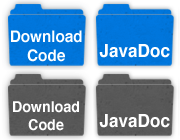
<style>
.page{position:relative;width:180px;height:140px}
.page>*{position:absolute;margin:0}
.t1{font:16px "Helvetica-Bold";color:#ffffff;scale:0.95 1}
.t2{font:18px "Helvetica-Bold";color:#ffffff;scale:0.95 1}
.t3{font:15px "Helvetica-Bold";color:#ffffff;scale:0.95 1}
</style>
<div class="page">
<p class="t1" style="left:11px;top:30px;width:71px;height:32px;text-align:center">Download<br>Code</p>
<p class="t2" style="left:99px;top:44px;width:71px;height:14px">JavaDoc</p>
<p class="t3" style="left:13px;top:101px;width:66px;height:30px;text-align:center">Download<br>Code</p>
<p class="t2" style="left:99px;top:114px;width:71px;height:14px">JavaDoc</p>
</div>
